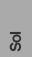
<style>
.page{position:relative;width:32px;height:57px;background:#aaaaaa}
.page>*{position:absolute;margin:0}
.t1{font:14.9px "Helvetica-Bold";letter-spacing:-0.08em;color:#333333}
</style>
<div class="page">
<p class="t1" style="left:9px;top:31px;width:13px;height:21px;rotate:-90deg">Sol</p>
</div>
